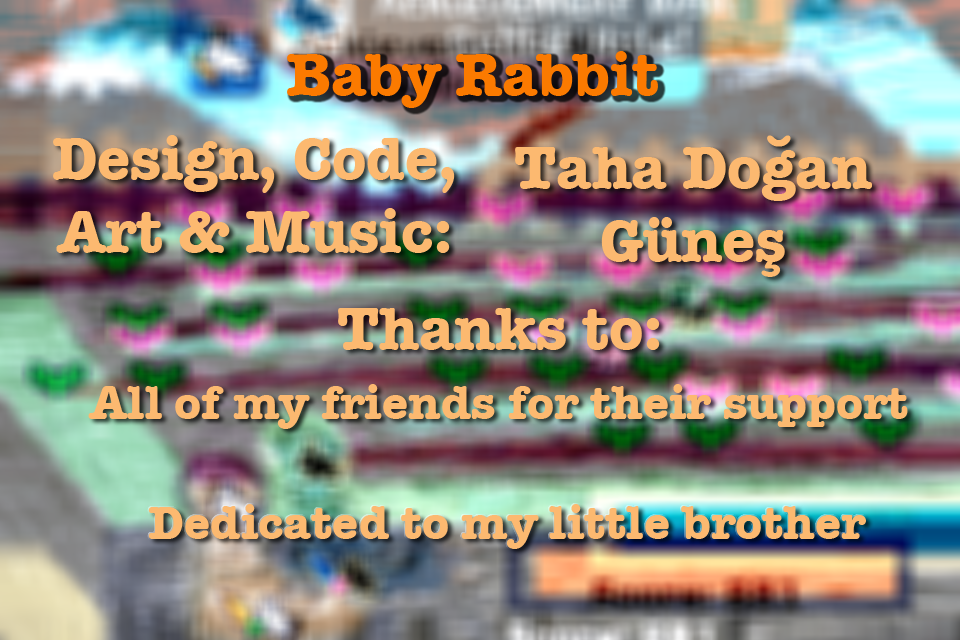
<style>
.page{position:relative;width:960px;height:640px}
.page>*{position:absolute;margin:0}
.t1{font:60.6px "AmericanTypewriter-Bold";color:#fb7a00}
.t2{font:60.6px "AmericanTypewriter-Bold";color:#fcb970}
.t3{font:48px "AmericanTypewriter-Bold";color:#fcb970}
</style>
<div class="page">
<p class="t1" style="left:287px;top:51px;width:371px;height:57px">Baby Rabbit</p>
<p class="t2" style="left:53px;top:135px;width:402px;height:118px;text-align:center">Design, Code,<br>Art &amp; Music:</p>
<p class="t2" style="left:515px;top:135px;width:357px;height:142px;text-align:center">Taha Doğan<br>Güneş</p>
<p class="t2" style="left:338px;top:308px;width:322px;height:42px">Thanks to:</p>
<p class="t3" style="left:88px;top:384px;width:820px;height:45px">All of my friends for their support</p>
<p class="t3" style="left:148px;top:504px;width:718px;height:45px">Dedicated to my little brother</p>
</div>
